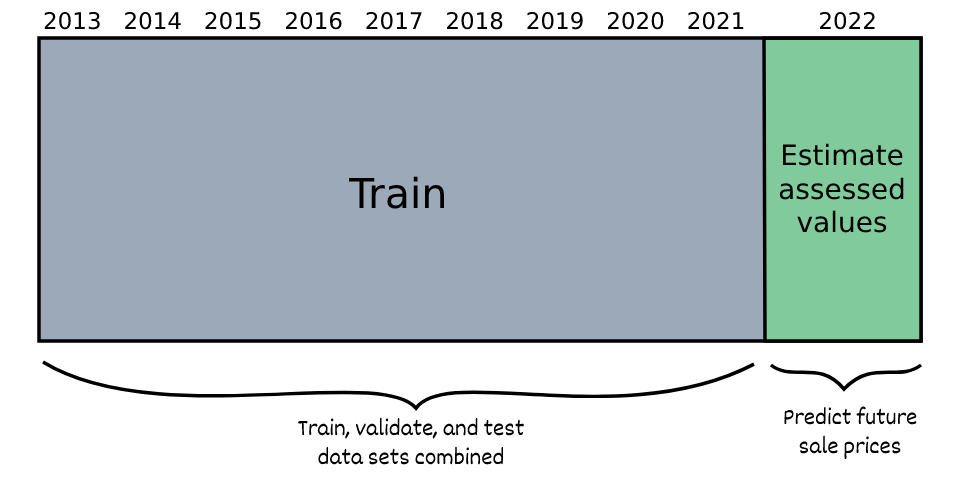
<style>
.page{position:relative;width:960px;height:480px;background:#9ba9b9}
.page>*{position:absolute;margin:0}
.t1{font:23px "DejaVuSans";color:#000000}
.t2{font:28px "DejaVuSans";color:#000000}
.t3{font:41px "DejaVuSans";color:#000000}
.t4{font:24px "Dekko";color:#000000}
</style>
<div class="page">
<p class="t1" style="left:44px;top:11px;width:831px;height:19px">2013   2014   2015   2016   2017   2018   2019   2020   2021          2022</p>
<p class="t2" style="left:779px;top:143px;width:125px;height:90px;text-align:center">Estimate<br>assessed<br>values</p>
<p class="t3" style="left:348px;top:176px;width:96px;height:33px">Train</p>
<p class="t4" style="left:784px;top:406px;width:133px;height:53px;text-align:center">Predict future<br>sale prices</p>
<p class="t4" style="left:298px;top:417px;width:226px;height:48px;text-align:center">Train, validate, and test<br>data sets combined</p>
</div>
